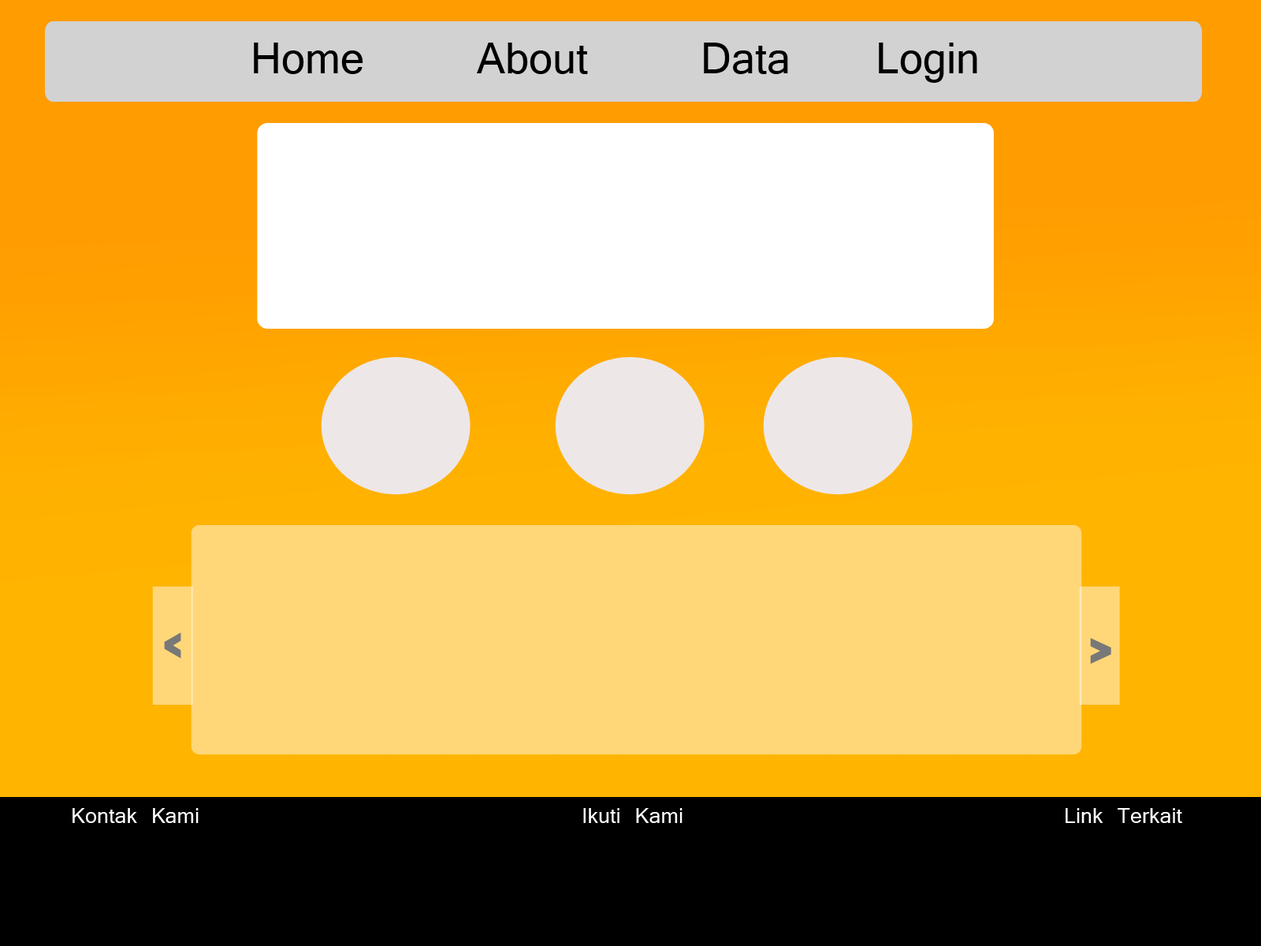
<style>
.page{position:relative;width:1261px;height:946px}
.page>*{position:absolute;margin:0}
.t1{font:47.3px "Vrinda";color:#000000}
.t2{font:23.6px "Vrinda";color:#ffffff}
</style>
<div class="page">
<p class="t1" style="left:254px;top:43px;width:723px;height:40px">Home     About    Data   Login</p>
<p class="t2" style="left:73px;top:808px;width:1109px;height:15px">Kontak Kami              Ikuti Kami              Link Terkait</p>
</div>
